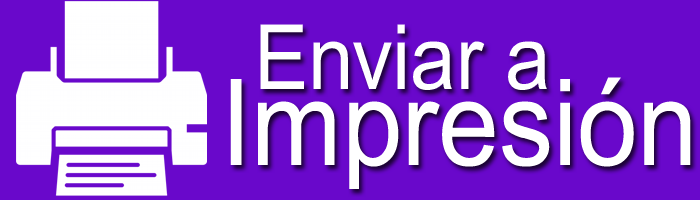
<style>
.page{position:relative;width:700px;height:200px;background:#6908cb}
.page>*{position:absolute;margin:0}
.t1{font:90px "ArialMT";color:#ffffff;scale:0.9 1}
.t2{font:120px "ArialMT";color:#ffffff;scale:0.9 1}
</style>
<div class="page">
<p class="t1" style="left:260px;top:24px;width:287px;height:66px">Enviar a</p>
<p class="t2" style="left:230px;top:77px;width:461px;height:112px">Impresión</p>
</div>
